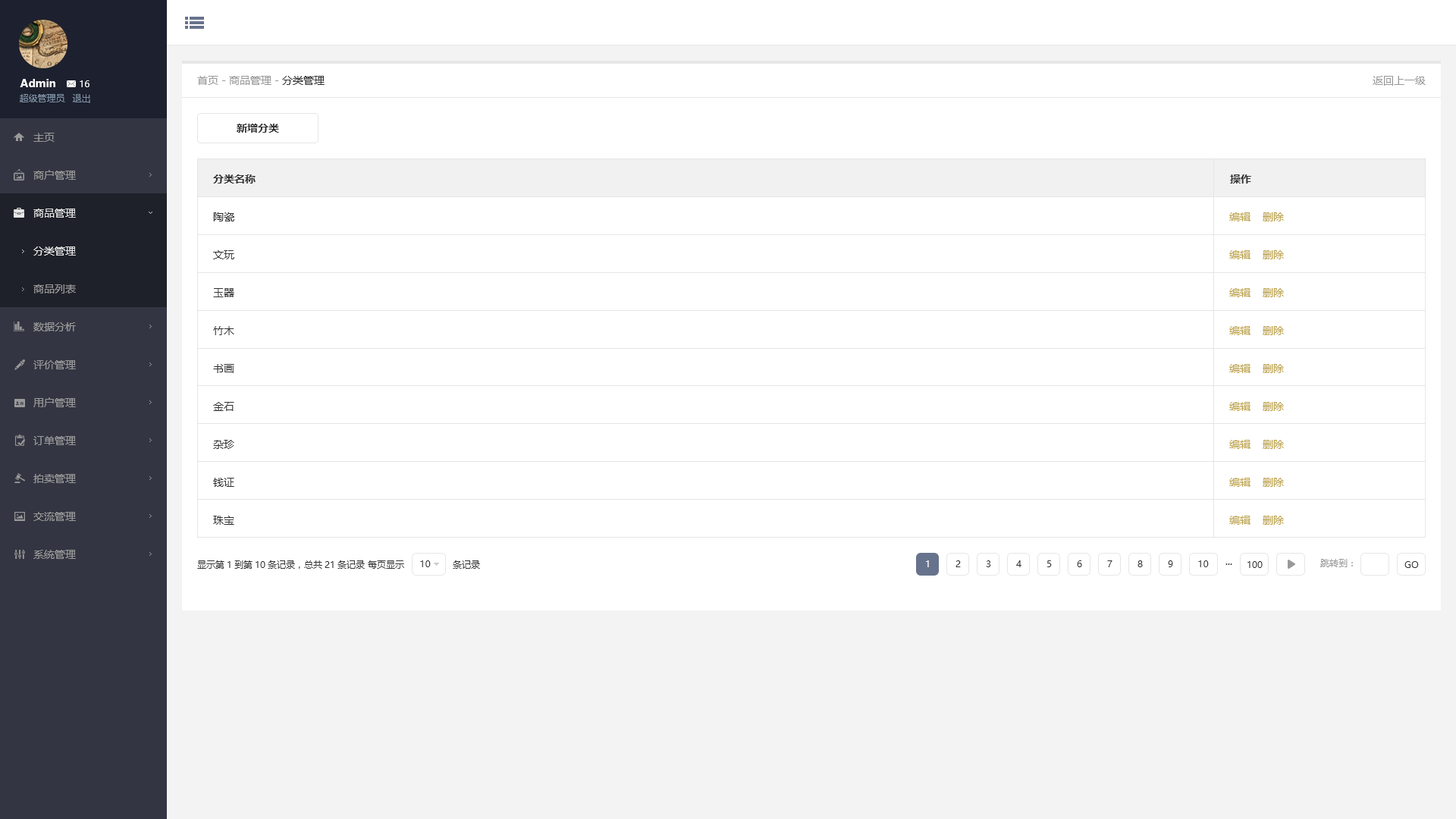
<style>
.page{position:relative;width:1456px;height:819px;background:#ffffff}
.page>*{position:absolute;margin:0}
.t1{font:10.6px "MicrosoftYaHei";color:#999999}
.t2{font:10.6px "MicrosoftYaHei";color:#333333}
.t3{font:10.6px "MicrosoftYaHei-Bold";color:#ffffff}
.t4{font:9.1px "MicrosoftYaHei";color:#ffffff}
.t5{font:9.1px "MicrosoftYaHei";color:#8095a8}
.t6{font:10.6px "MicrosoftYaHei-Bold";color:#333333}
.t7{font:10.6px/37.9px "MicrosoftYaHei";color:#999999}
.t8{font:10.6px/37.9px "MicrosoftYaHei";color:#e6e6e6}
.t9{font:10.6px/37.9px "MicrosoftYaHei";color:#333333}
.t10{font:10.6px/37.9px "MicrosoftYaHei";color:#bda34a}
.t11{font:9.1px "MicrosoftYaHei";color:#333333}
.t12{font:9.1px "MicrosoftYaHei";color:#999999}
</style>
<div class="page">
<p class="t1" style="left:197px;top:76px;width:128px;height:9px">首页 - 商品管理 - <span class="t2">分类管理</span></p>
<p class="t1" style="left:1373px;top:76px;width:53px;height:10px">返回上一级</p>
<p class="t3" style="left:20px;top:79px;width:35px;height:8px">Admin</p>
<p class="t4" style="left:80px;top:80px;width:9px;height:7px">16</p>
<p class="t5" style="left:20px;top:94px;width:45px;height:8px">超级管理员</p>
<p class="t5" style="left:72px;top:94px;width:18px;height:9px">退出</p>
<p class="t6" style="left:237px;top:124px;width:42px;height:9px">新增分类</p>
<p class="t7" style="left:33px;top:133px;width:43px;height:426px">主页<br>商户管理<br><span class="t8">商品管理<br></span><br><br>数据分析<br>评价管理<br>用户管理<br>订单管理<br>拍卖管理<br>交流管理<br>系统管理</p>
<p class="t6" style="left:213px;top:174px;width:43px;height:10px">分类名称</p>
<p class="t6" style="left:1230px;top:174px;width:21px;height:10px">操作</p>
<p class="t9" style="left:213px;top:212px;width:21px;height:313px">陶瓷<br>文玩<br>玉器<br>竹木<br>书画<br>金石<br>杂珍<br>钱证<br>珠宝</p>
<p class="t10" style="left:1229px;top:212px;width:55px;height:313px">编辑    删除<br>编辑    删除<br>编辑    删除<br>编辑    删除<br>编辑    删除<br>编辑    删除<br>编辑    删除<br>编辑    删除<br>编辑    删除</p>
<p class="t8" style="left:33px;top:246px;width:43px;height:47px">分类管理<br><span class="t7">商品列表</span></p>
<p class="t11" style="left:197px;top:560px;width:283px;height:9px">显示第1到第10条记录，总共21条记录 每页显示                条记录</p>
<p class="t11" style="left:420px;top:560px;width:11px;height:7px">10</p>
<p class="t4" style="left:926px;top:560px;width:3px;height:7px">1</p>
<p class="t11" style="left:955px;top:560px;width:6px;height:7px">2</p>
<p class="t11" style="left:986px;top:560px;width:5px;height:7px">3</p>
<p class="t11" style="left:1016px;top:560px;width:5px;height:7px">4</p>
<p class="t11" style="left:1047px;top:560px;width:5px;height:7px">5</p>
<p class="t11" style="left:1077px;top:560px;width:5px;height:7px">6</p>
<p class="t11" style="left:1107px;top:560px;width:5px;height:7px">7</p>
<p class="t11" style="left:1137px;top:560px;width:6px;height:7px">8</p>
<p class="t11" style="left:1168px;top:560px;width:5px;height:7px">9</p>
<p class="t11" style="left:1198px;top:560px;width:11px;height:7px">10</p>
<p class="t11" style="left:1225px;top:563px;width:7px;height:2px">...</p>
<p class="t11" style="left:1247px;top:561px;width:16px;height:7px">100</p>
<p class="t12" style="left:1320px;top:559px;width:33px;height:8px">跳转到：</p>
<p class="t11" style="left:1404px;top:561px;width:15px;height:7px">GO</p>
</div>
